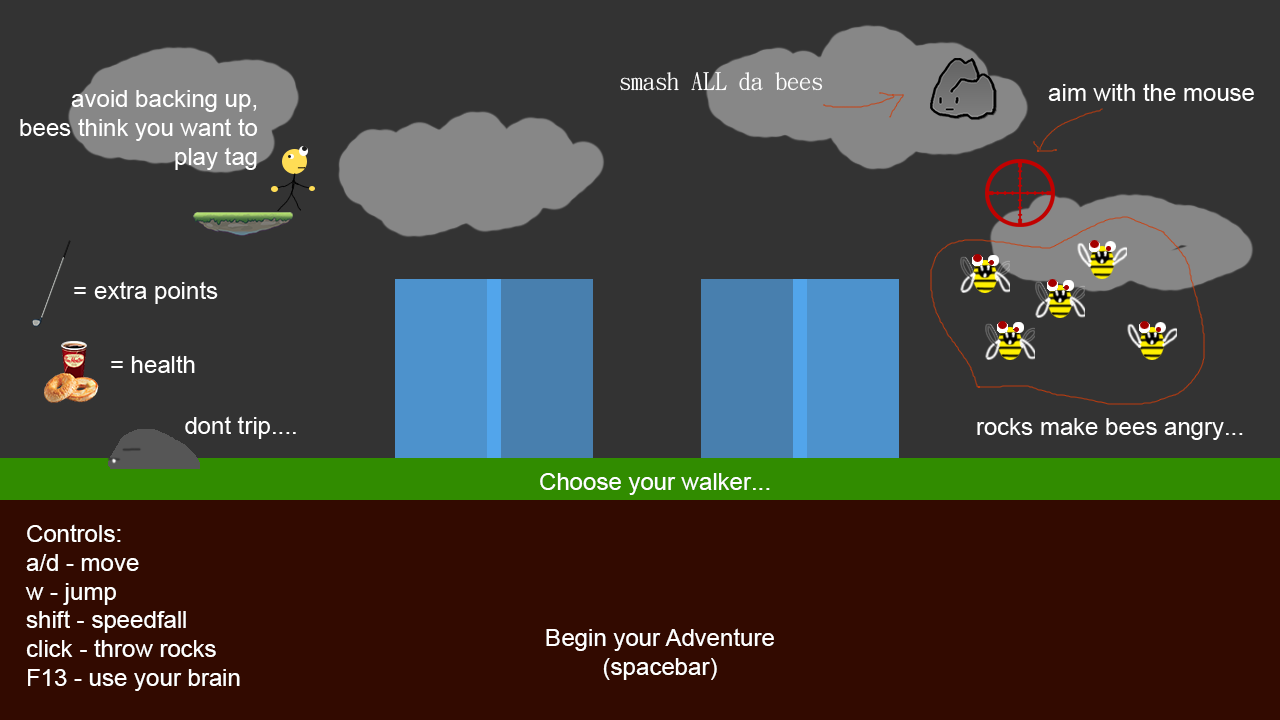
<style>
.page{position:relative;width:1280px;height:720px;background:#333333}
.page>*{position:absolute;margin:0}
.t1{font:24px "DFKaiShu-SB-Estd-BF";color:#ffffff}
.t2{font:24px "ArialMT";color:#ffffff}
</style>
<div class="page">
<p class="t1" style="left:620px;top:72px;width:203px;height:19px">smash ALL da bees</p>
<p class="t2" style="left:1048px;top:83px;width:206px;height:18px">aim with the mouse</p>
<p class="t2" style="left:20px;top:90px;width:238px;height:80px">,avoid backing up<br>bees think you want to<br>play tag</p>
<p class="t2" style="left:74px;top:281px;width:144px;height:23px">extra points =</p>
<p class="t2" style="left:111px;top:355px;width:84px;height:18px">health =</p>
<p class="t2" style="left:185px;top:416px;width:111px;height:23px">....dont trip</p>
<p class="t2" style="left:977px;top:418px;width:266px;height:22px">...rocks make bees angry</p>
<p class="t2" style="left:540px;top:473px;width:230px;height:22px">...Choose your walker</p>
<p class="t2" style="left:25px;top:524px;width:215px;height:167px;text-align:right">:Controls<br>a/d - move<br>w - jump<br>shift - speedfall<br>click - throw rocks<br>F13 - use your brain</p>
<p class="t2" style="left:546px;top:628px;width:228px;height:52px;text-align:center">Begin your Adventure<br>(spacebar)</p>
</div>
